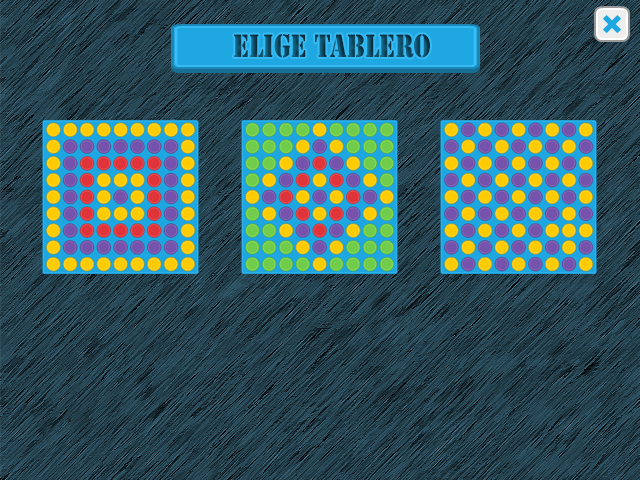
<style>
.page{position:relative;width:640px;height:480px}
.page>*{position:absolute;margin:0}
.t1{font:30px "StencilStd";scale:0.8 1}
</style>
<div class="page">
<p class="t1" style="left:234px;top:34px;width:196px;height:24px">ELIGE TABLERO</p>
</div>
